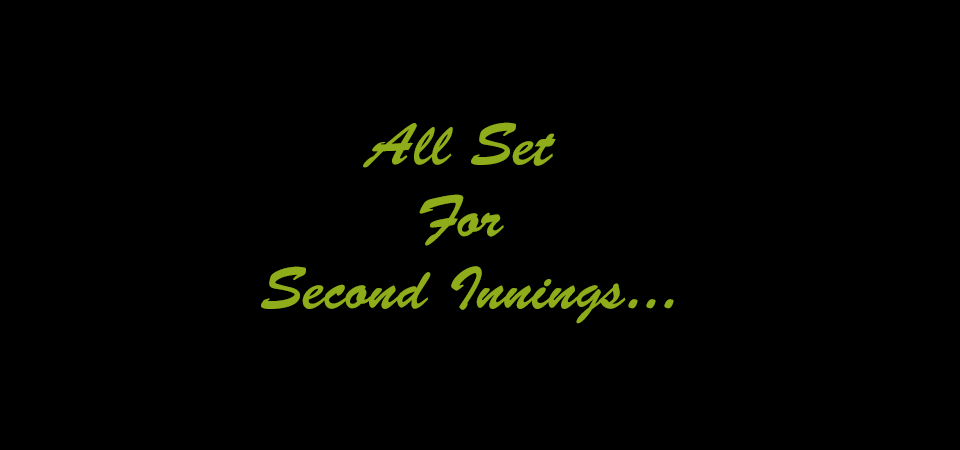
<style>
.page{position:relative;width:960px;height:450px;background:#000000}
.page>*{position:absolute;margin:0}
.t1{font:60px "BrushScriptStd";color:#8fac1a}
</style>
<div class="page">
<p class="t1" style="left:261px;top:122px;width:413px;height:202px;text-align:center">All Set <br>For <br>Second Innings...</p>
</div>
